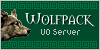
<style>
.page{position:relative;width:100px;height:50px;background:#004b2c}
.page>*{position:absolute;margin:0}
.t1{font:15px "Morpheus";color:#ffffff}
.t2{font:10px "Pixel";color:#c0c0c0}
</style>
<div class="page">
<p class="t1" style="left:25px;top:13px;width:70px;height:14px">Wolfpack</p>
<p class="t2" style="left:41px;top:29px;width:39px;height:6px">UO Server</p>
</div>
